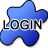
<style>
.page{position:relative;width:48px;height:48px;background:#ffffff}
.page>*{position:absolute;margin:0}
.t1{font:12px "ArialMT";color:#000000;font-weight:bold;scale:1.03 1}
</style>
<div class="page">
<p class="t1" style="left:3px;top:20px;width:39px;height:10px">LOGIN</p>
</div>
